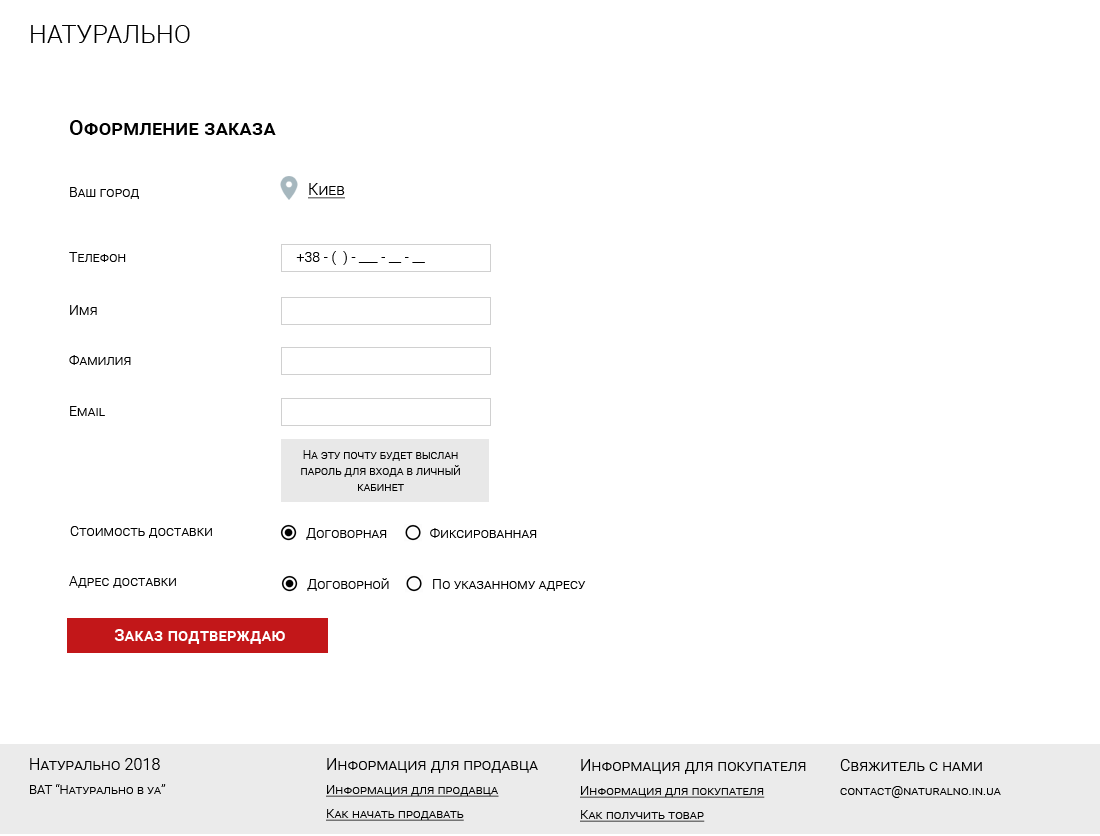
<style>
.page{position:relative;width:1100px;height:836px;background:#ffffff}
.page>*{position:absolute;margin:0}
.t1{font:25px "Roboto-Light";letter-spacing:0.01em;color:#000000;font-variant:small-caps}
.t2{font:21px "Roboto-Medium";letter-spacing:0.01em;color:#000000;font-variant:small-caps}
.t3{font:16px "Roboto-Light";letter-spacing:0.01em;color:#000000;font-variant:small-caps;text-decoration:underline}
.t4{font:14px "Roboto-Light";letter-spacing:0.01em;color:#000000;font-variant:small-caps}
.t5{font:12px/16px "Roboto-Light";letter-spacing:0.01em;color:#000000;font-variant:small-caps}
.t6{font:17px "Roboto-Medium";letter-spacing:0.01em;color:#ffffff;font-variant:small-caps}
.t7{font:13px/24px "Roboto-Light";letter-spacing:0.01em;color:#000000;font-variant:small-caps}
.t8{font:16px/26px "Roboto-Light";letter-spacing:0.01em;color:#000000;font-variant:small-caps}
.t9{font:13px/24px "Roboto-Light";letter-spacing:0.01em;color:#000000;font-variant:small-caps;text-decoration:underline}
</style>
<div class="page">
<p class="t1" style="left:31px;top:25px;width:159px;height:18px">НАТУРАЛЬНО</p>
<p class="t2" style="left:70px;top:120px;width:206px;height:15px">Оформление заказа</p>
<p class="t3" style="left:308px;top:183px;width:37px;height:16px">Киев</p>
<p class="t4" style="left:70px;top:187px;width:69px;height:12px">Ваш город</p>
<p class="t4" style="left:69px;top:251px;width:356px;height:14px">Телефон                                                +38 - (  ) - ___ - __ - __</p>
<p class="t4" style="left:70px;top:305px;width:27px;height:10px">Имя</p>
<p class="t4" style="left:69px;top:355px;width:62px;height:10px">Фамилия</p>
<p class="t4" style="left:70px;top:406px;width:35px;height:10px">Email</p>
<p class="t5" style="left:301px;top:450px;width:159px;height:41px;text-align:center">На эту почту будет выслан пароль для входа в личный кабинет</p>
<p class="t4" style="left:70px;top:526px;width:142px;height:12px">Стоимость доставки</p>
<p class="t4" style="left:306px;top:528px;width:231px;height:12px">Договорная            Фиксированная</p>
<p class="t4" style="left:69px;top:576px;width:107px;height:12px">Адрес доставки</p>
<p class="t4" style="left:307px;top:578px;width:279px;height:13px">Договорной            По указанному адресу</p>
<p class="t6" style="left:114px;top:629px;width:171px;height:15px">Заказ подтверждаю</p>
<p class="t7" style="left:30px;top:758px;width:136px;height:36px"><span class="t8">Натурально 2018<br></span>ВАТ “Натурально в уа”</p>
<p class="t9" style="left:326px;top:758px;width:212px;height:63px"><span class="t8">Информация для продавца<br></span>Информация для продавца<br>Как начать продавать</p>
<p class="t9" style="left:580px;top:759px;width:226px;height:63px"><span class="t8">Информация для покупателя<br></span>Информация для покупателя<br>Как получить товар</p>
<p class="t7" style="left:840px;top:759px;width:161px;height:39px"><span class="t8">Свяжитель с нами<br></span>contact@naturalno.in.ua</p>
</div>
